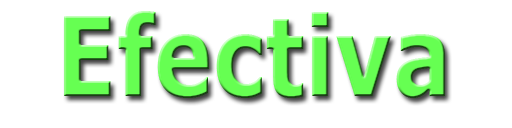
<style>
.page{position:relative;width:512px;height:128px;background:#ffffff}
.page>*{position:absolute;margin:0}
.t1{font:109.7px "Verdana-Bold";color:#66ff52;scale:0.81 1}
</style>
<div class="page">
<p class="t1" style="left:64px;top:11px;width:381px;height:87px">Efectiva</p>
</div>
